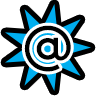
<style>
.page{position:relative;width:96px;height:96px;background:#ffffff}
.page>*{position:absolute;margin:0}
.t1{font:46.7px "Arvo";color:#000000}
</style>
<div class="page">
<p class="t1" style="left:24px;top:25px;width:47px;height:47px">@</p>
</div>
